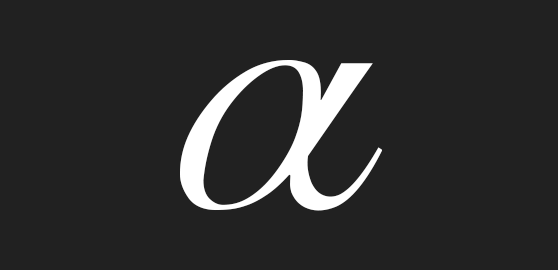
<style>
.page{position:relative;width:558px;height:270px;background:#212121}
.page>*{position:absolute;margin:0}
.t1{font:416.8px "SnellRoundhand";color:#ffffff}
</style>
<div class="page">
<p class="t1" style="left:180px;top:60px;width:202px;height:151px">ɑ</p>
</div>
